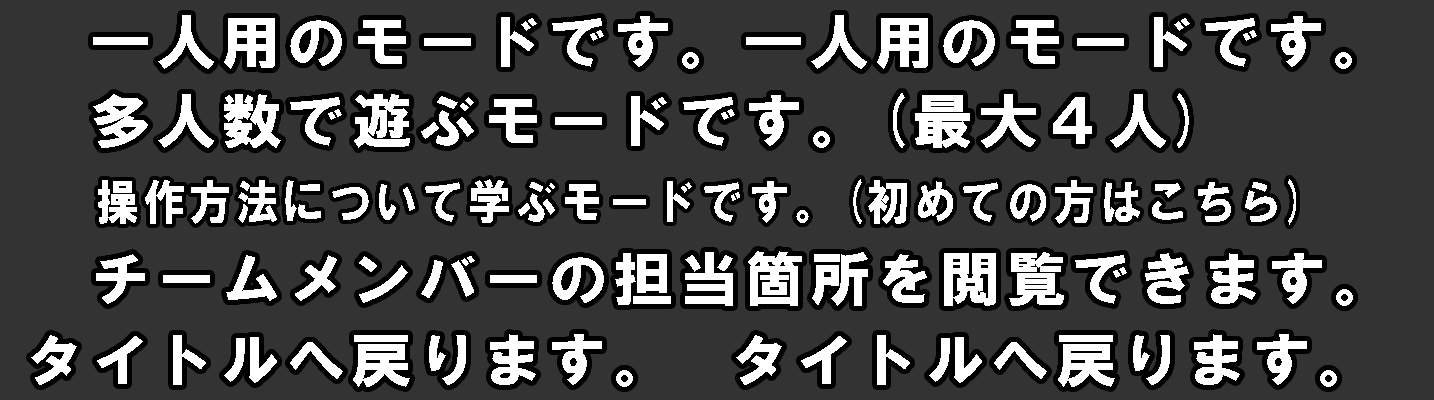
<style>
.page{position:relative;width:1434px;height:400px;background:#333333}
.page>*{position:absolute;margin:0}
.t1{font:58.5px "HGSSoeiKakugothicUB";letter-spacing:0.08em;color:#ffffff;scale:1.03 1}
.t2{font:47.7px "HGSSoeiKakugothicUB";letter-spacing:0.08em;color:#ffffff;scale:0.9 1}
</style>
<div class="page">
<p class="t1" style="left:93px;top:15px;width:606px;height:54px">一人用のモードです。</p>
<p class="t1" style="left:746px;top:15px;width:606px;height:54px">一人用のモードです。</p>
<p class="t1" style="left:93px;top:93px;width:1096px;height:55px">多人数で遊ぶモードです。(最大４人)</p>
<p class="t2" style="left:98px;top:179px;width:1198px;height:46px">操作方法について学ぶモードです。(初めての方はこちら)</p>
<p class="t1" style="left:96px;top:251px;width:1257px;height:55px">チームメンバーの担当箇所を閲覧できます。</p>
<p class="t1" style="left:31px;top:334px;width:602px;height:53px">タイトルへ戻ります。</p>
<p class="t1" style="left:736px;top:334px;width:601px;height:53px">タイトルへ戻ります。</p>
</div>
